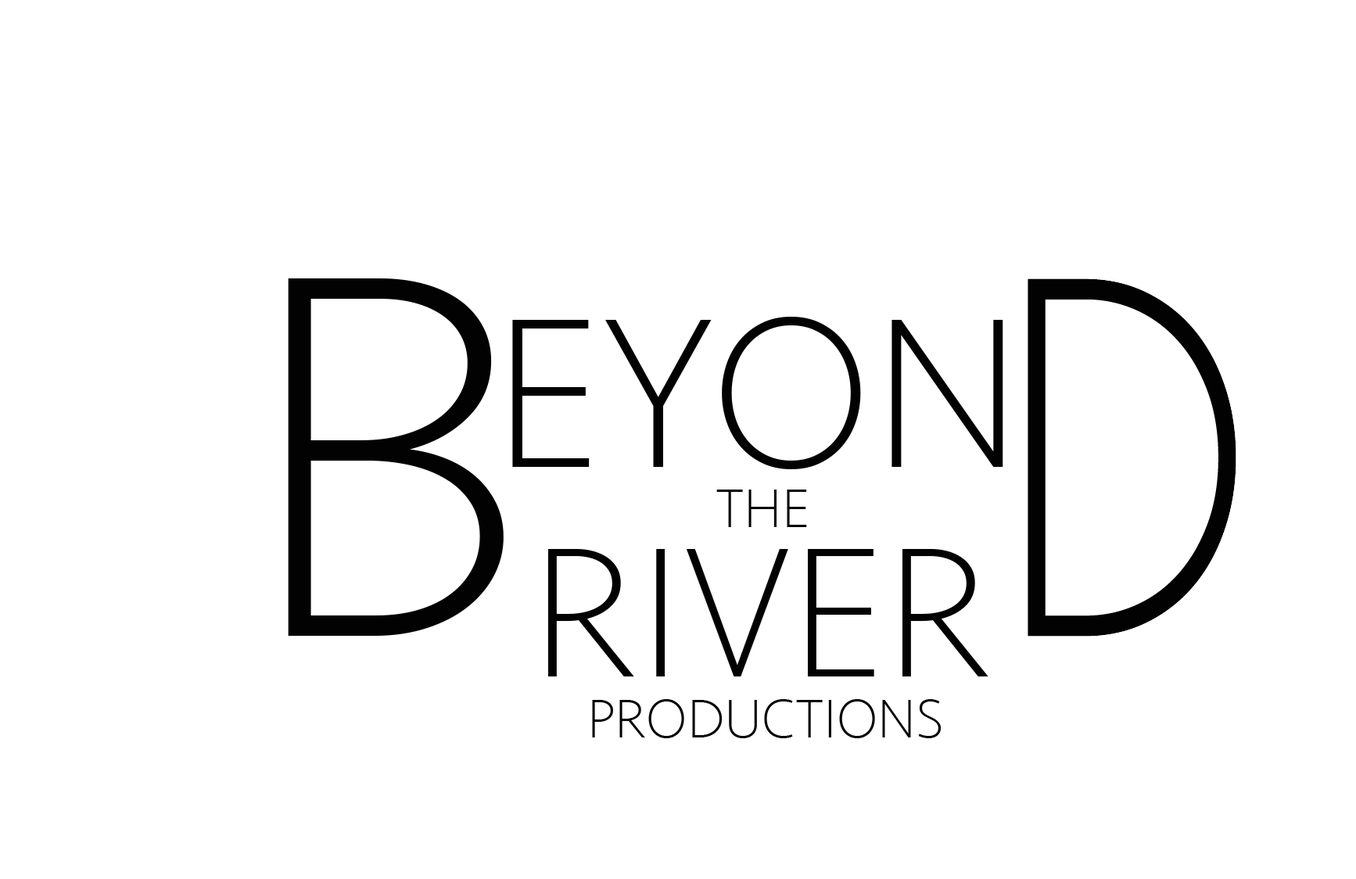
<style>
.page{position:relative;width:1356px;height:879px;background:#ffffff}
.page>*{position:absolute;margin:0}
.t1{font:536.3px "Seravek-ExtraLight";color:#020202}
.t2{font:221.1px "Seravek-ExtraLight";color:#020202}
.t3{font:56.3px "Seravek-ExtraLight";color:#020202}
.t4{font:191.3px "Seravek-ExtraLight";color:#020202}
</style>
<div class="page">
<p class="t1" style="left:288px;top:278px;width:216px;height:358px">B</p>
<p class="t2" style="left:512px;top:317px;width:492px;height:152px">EYON</p>
<p class="t3" style="left:716px;top:490px;width:91px;height:37px">THE</p>
<p class="t4" style="left:548px;top:549px;width:441px;height:128px">RIVER</p>
<p class="t3" style="left:592px;top:699px;width:349px;height:39px">PRODUCTIONS</p>
</div>
